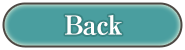
<style>
.page{position:relative;width:185px;height:50px;background:#4a9e9f}
.page>*{position:absolute;margin:0}
.t1{font:26px "RyuminPro-ExBold";letter-spacing:-0.04em;color:#ffffff}
</style>
<div class="page">
<p class="t1" style="left:65px;top:15px;width:57px;height:20px">Back</p>
</div>
